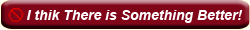
<style>
.page{position:relative;width:250px;height:30px;background:#800519}
.page>*{position:absolute;margin:0}
.t1{font:14px "Arial-BoldItalicMT";color:#ffffff}
</style>
<div class="page">
<p class="t1" style="left:27px;top:10px;width:216px;height:13px">I thik There is Something Better!</p>
</div>
